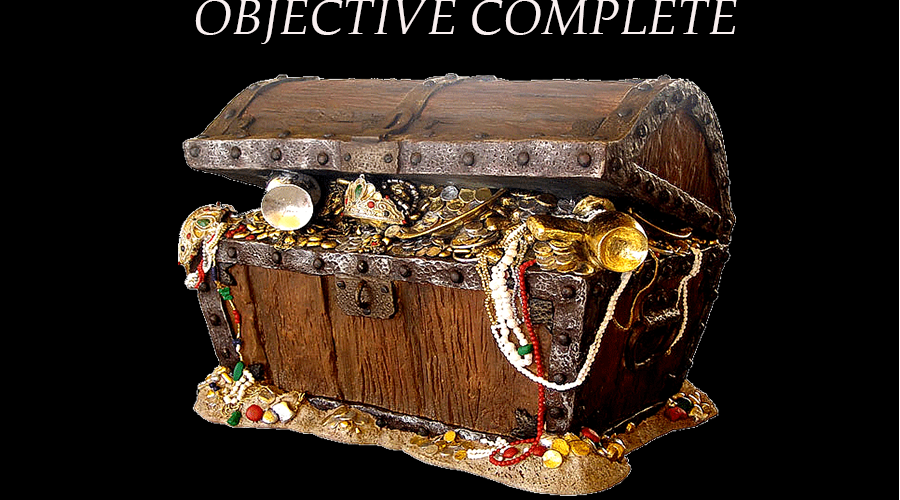
<style>
.page{position:relative;width:900px;height:500px;background:#000000}
.page>*{position:absolute;margin:0}
.t1{font:12px "Palatino-Italic";color:#f9f0f0}
</style>
<div class="page">
<p class="t1" style="left:195px;top:0px;width:542px;height:44px">OBJECTIVE COMPLETE</p>
</div>
